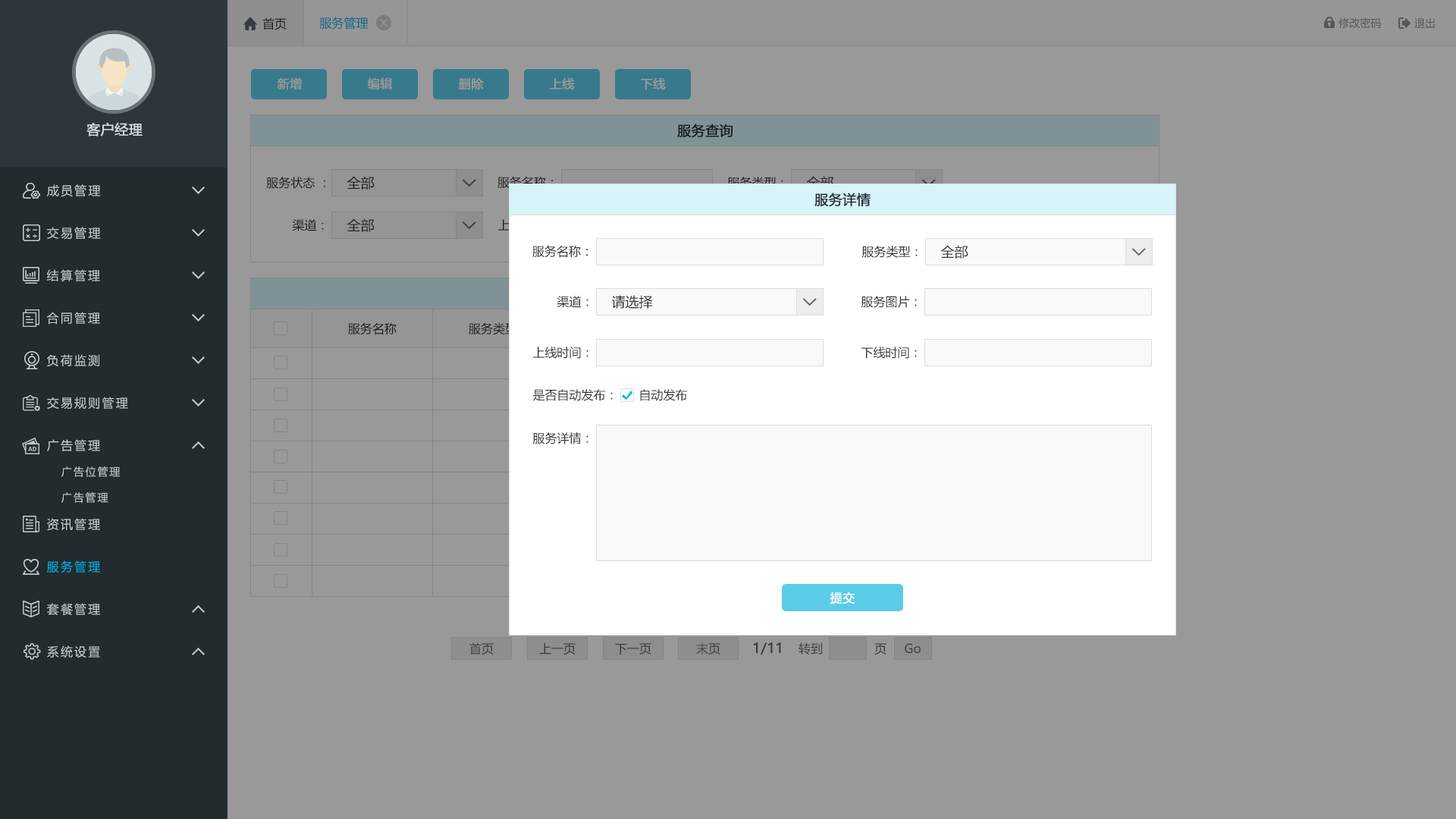
<style>
.page{position:relative;width:1456px;height:819px;background:#999999}
.page>*{position:absolute;margin:0}
.t1{font:12.1px "MicrosoftYaHei";color:#242e3b}
.t2{font:12.1px "MicrosoftYaHei";color:#006788}
.t3{font:10.6px "MicrosoftYaHei";color:#53565c}
.t4{font:12.1px "MicrosoftYaHei";color:#999999;font-weight:bold}
.t5{font:13.6px "MicrosoftYaHei";color:#d1dce2;font-weight:bold}
.t6{font:13.6px "MicrosoftYaHei";color:#242e3b;font-weight:bold}
.t7{font:12.1px "MicrosoftYaHei";letter-spacing:0.14em;color:#c2cdd2}
.t8{font:12.1px "MicrosoftYaHei";color:#333333}
.t9{font:13.6px "MicrosoftYaHei";color:#333333}
.t10{font:13.6px "MicrosoftYaHei"}
.t11{font:10.6px "MicrosoftYaHei";letter-spacing:0.14em;color:#c2cdd2}
.t12{font:12.1px "MicrosoftYaHei";letter-spacing:0.14em;color:#00ace2}
.t13{font:12.1px "MicrosoftYaHei";color:#ffffff;font-weight:bold}
.t14{font:12.1px "MicrosoftYaHei";color:#3a3d40}
.t15{font:13.6px "MicrosoftYaHei";color:#3a3d40;font-weight:bold}
</style>
<div class="page">
<p class="t1" style="left:262px;top:17px;width:25px;height:13px">首页</p>
<p class="t2" style="left:319px;top:17px;width:50px;height:13px">服务管理</p>
<p class="t3" style="left:1338px;top:17px;width:43px;height:12px">修改密码</p>
<p class="t3" style="left:1414px;top:17px;width:21px;height:11px">退出</p>
<p class="t4" style="left:277px;top:77px;width:25px;height:13px">新增</p>
<p class="t4" style="left:367px;top:77px;width:26px;height:13px">编辑</p>
<p class="t4" style="left:458px;top:77px;width:26px;height:13px">删除</p>
<p class="t4" style="left:550px;top:77px;width:25px;height:13px">上线</p>
<p class="t4" style="left:641px;top:77px;width:25px;height:13px">下线</p>
<p class="t5" style="left:86px;top:122px;width:57px;height:14px">客户经理</p>
<p class="t6" style="left:677px;top:124px;width:56px;height:14px">服务查询</p>
<p class="t7" style="left:47px;top:184px;width:54px;height:13px">成员管理</p>
<p class="t8" style="left:266px;top:177px;width:59px;height:12px">服务状态 ：</p>
<p class="t9" style="left:347px;top:176px;width:28px;height:14px">全部</p>
<p class="t8" style="left:497px;top:176px;width:56px;height:13px">服务名称：</p>
<p class="t8" style="left:727px;top:177px;width:56px;height:12px">服务类型：</p>
<p class="t10" style="left:806px;top:176px;width:28px;height:14px">全部</p>
<p class="t6" style="left:814px;top:193px;width:57px;height:14px">服务详情</p>
<p class="t8" style="left:292px;top:219px;width:32px;height:12px">渠道：</p>
<p class="t9" style="left:347px;top:218px;width:28px;height:14px">全部</p>
<p class="t7" style="left:47px;top:227px;width:54px;height:13px">交易管理</p>
<p class="t8" style="left:532px;top:245px;width:56px;height:13px">服务名称：</p>
<p class="t8" style="left:861px;top:246px;width:57px;height:12px">服务类型：</p>
<p class="t9" style="left:940px;top:245px;width:28px;height:14px">全部</p>
<p class="t7" style="left:46px;top:269px;width:54px;height:13px">结算管理</p>
<p class="t8" style="left:557px;top:296px;width:31px;height:12px">渠道：</p>
<p class="t9" style="left:611px;top:295px;width:42px;height:14px">请选择</p>
<p class="t8" style="left:861px;top:296px;width:56px;height:12px">服务图片：</p>
<p class="t7" style="left:46px;top:312px;width:54px;height:13px">合同管理</p>
<p class="t1" style="left:348px;top:322px;width:49px;height:13px">服务名称</p>
<p class="t1" style="left:469px;top:322px;width:48px;height:13px">服务类型</p>
<p class="t8" style="left:533px;top:347px;width:55px;height:12px">上线时间：</p>
<p class="t8" style="left:861px;top:347px;width:56px;height:12px">下线时间：</p>
<p class="t7" style="left:46px;top:354px;width:53px;height:13px">负荷监测</p>
<p class="t8" style="left:532px;top:389px;width:81px;height:12px">是否自动发布：</p>
<p class="t8" style="left:640px;top:389px;width:48px;height:12px">自动发布</p>
<p class="t7" style="left:47px;top:397px;width:81px;height:12px">交易规则管理</p>
<p class="t8" style="left:532px;top:432px;width:56px;height:12px">服务详情：</p>
<p class="t7" style="left:47px;top:439px;width:53px;height:12px">广告管理</p>
<p class="t11" style="left:61px;top:466px;width:59px;height:11px">广告位管理</p>
<p class="t11" style="left:61px;top:492px;width:47px;height:11px">广告管理</p>
<p class="t7" style="left:47px;top:518px;width:53px;height:13px">资讯管理</p>
<p class="t12" style="left:47px;top:560px;width:53px;height:13px">服务管理</p>
<p class="t13" style="left:830px;top:591px;width:25px;height:13px">提交</p>
<p class="t7" style="left:47px;top:603px;width:53px;height:13px">套餐管理</p>
<p class="t7" style="left:47px;top:645px;width:53px;height:13px">系统设置</p>
<p class="t14" style="left:469px;top:642px;width:25px;height:13px">首页</p>
<p class="t14" style="left:539px;top:643px;width:37px;height:12px">上一页</p>
<p class="t14" style="left:615px;top:643px;width:36px;height:12px">下一页</p>
<p class="t14" style="left:696px;top:642px;width:24px;height:13px">末页</p>
<p class="t15" style="left:753px;top:642px;width:28px;height:13px">1/11</p>
<p class="t14" style="left:799px;top:642px;width:23px;height:12px">转到</p>
<p class="t14" style="left:874px;top:643px;width:12px;height:12px">页</p>
<p class="t14" style="left:905px;top:643px;width:16px;height:11px">Go</p>
</div>
